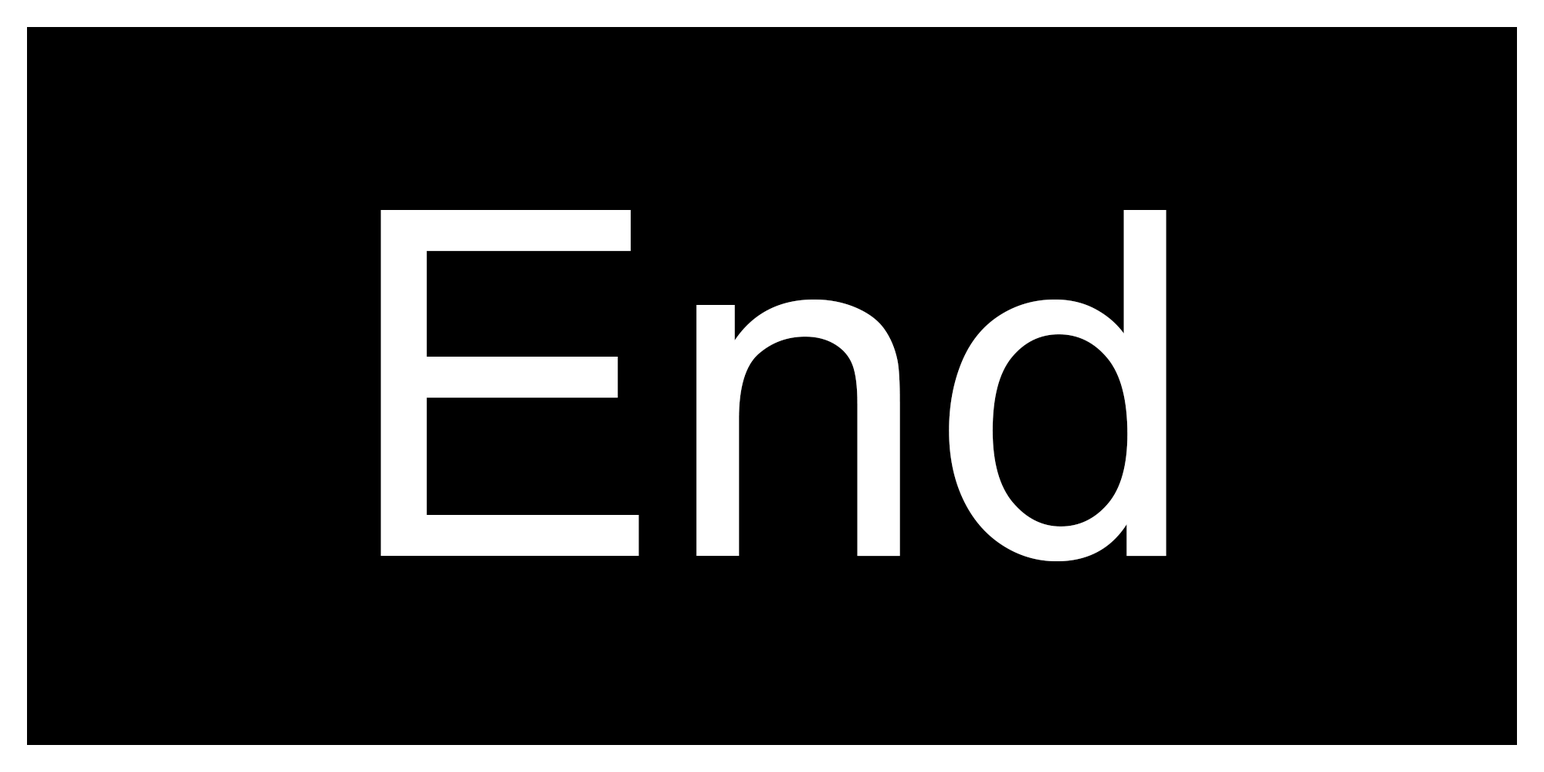
<style>
.page{position:relative;width:1544px;height:772px;background:#000000}
.page>*{position:absolute;margin:0}
.t1{font:482.6px "ArialMT";color:#ffffff}
</style>
<div class="page">
<p class="t1" style="left:381px;top:210px;width:786px;height:351px">End</p>
</div>
